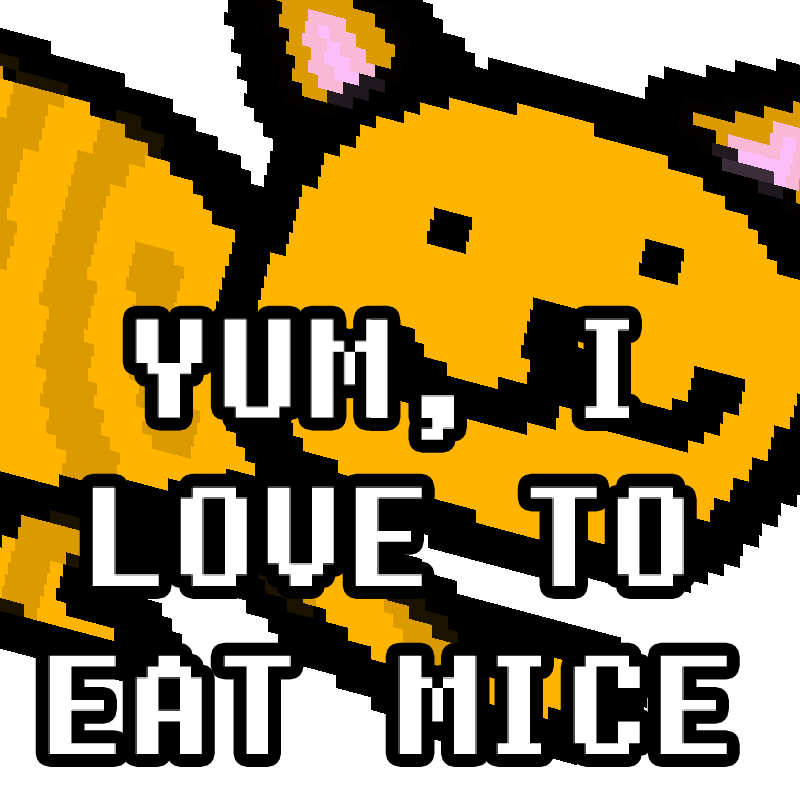
<style>
.page{position:relative;width:800px;height:800px;background:#000000}
.page>*{position:absolute;margin:0}
.t1{font:140px "Fixedsys";color:#ffffff}
</style>
<div class="page">
<p class="t1" style="left:48px;top:318px;width:679px;height:436px;text-align:center">YUM, I LOVE TO EAT MICE</p>
</div>
